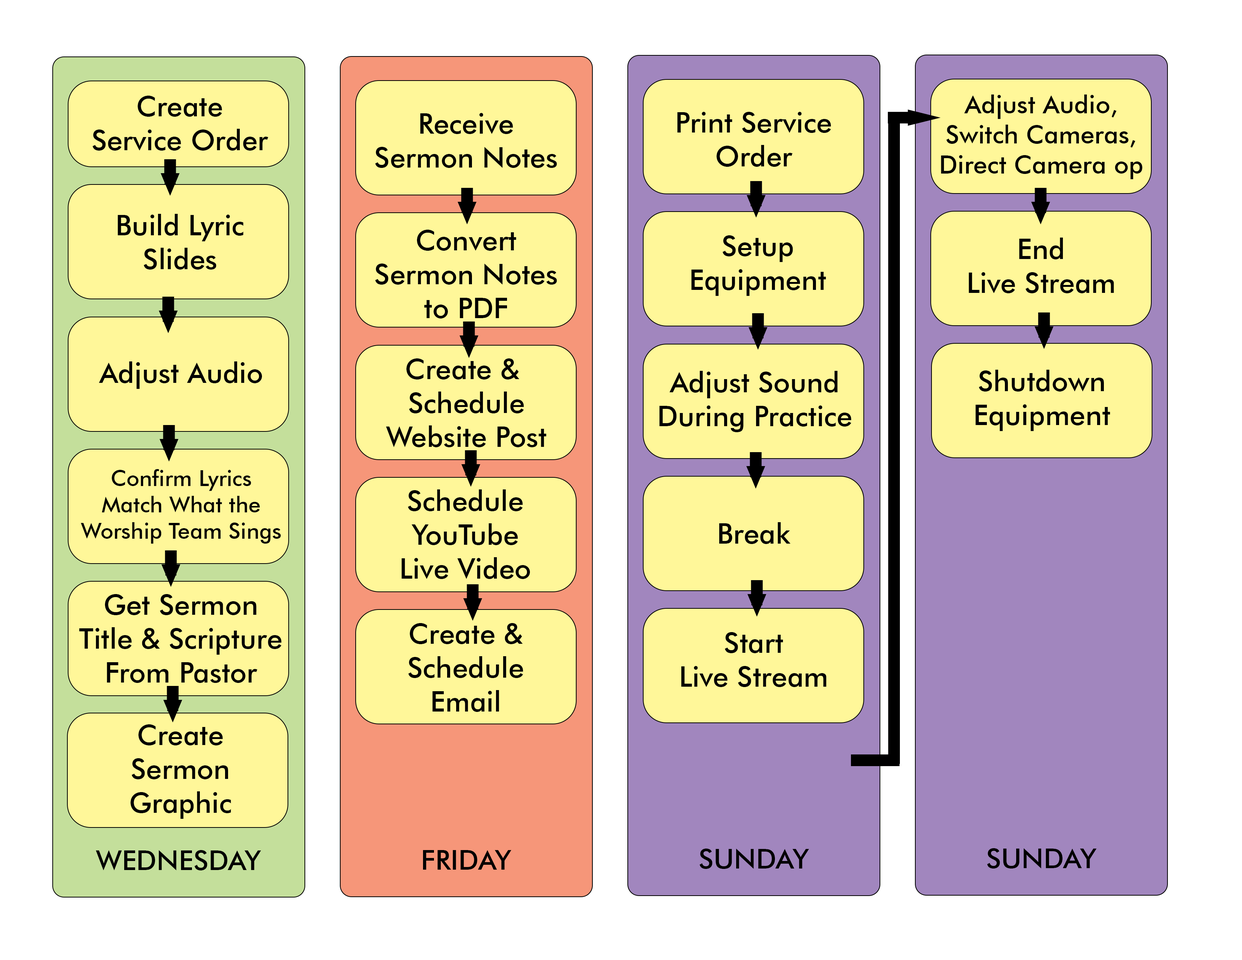
<style>
.page{position:relative;width:1242px;height:960px;background:#fff799}
.page>*{position:absolute;margin:0}
.t1{font:28.2px "FuturaBT-Medium";color:#000000}
.t2{font:25.1px "FuturaBT-Medium";color:#000000}
.t3{font:22px "FuturaBT-Medium";color:#000000}
.t4{font:47.1px "FuturaBT-Medium";color:#000000;text-transform:uppercase}
</style>
<div class="page">
<p class="t1" style="left:93px;top:96px;width:175px;height:55px;text-align:center">Create<br>Service Order</p>
<p class="t2" style="left:941px;top:94px;width:201px;height:85px;text-align:center">Adjust Audio,<br>Switch Cameras,<br>Direct Camera op</p>
<p class="t1" style="left:375px;top:113px;width:182px;height:55px;text-align:center">Receive<br>Sermon Notes</p>
<p class="t1" style="left:677px;top:112px;width:154px;height:55px;text-align:center">Print Service<br>Order</p>
<p class="t1" style="left:118px;top:214px;width:126px;height:56px;text-align:center">Build Lyric<br>Slides</p>
<p class="t1" style="left:375px;top:230px;width:182px;height:88px;text-align:center">Convert<br>Sermon Notes<br>to PDF</p>
<p class="t1" style="left:692px;top:235px;width:134px;height:61px;text-align:center">Setup<br>Equipment</p>
<p class="t1" style="left:969px;top:238px;width:145px;height:55px;text-align:center">End<br>Live Stream</p>
<p class="t1" style="left:99px;top:361px;width:163px;height:28px">Adjust Audio</p>
<p class="t1" style="left:386px;top:358px;width:161px;height:89px;text-align:center">Create &amp; <br>Schedule<br>Website Post</p>
<p class="t1" style="left:660px;top:371px;width:191px;height:61px;text-align:center">Adjust Sound<br>During Practice</p>
<p class="t1" style="left:976px;top:370px;width:134px;height:61px;text-align:center">Shutdown<br>Equipment</p>
<p class="t3" style="left:81px;top:469px;width:200px;height:75px;text-align:center">Confirm Lyrics<br>Match What the<br>Worship Team Sings</p>
<p class="t1" style="left:402px;top:489px;width:128px;height:90px;text-align:center">Schedule<br>YouTube<br>Live Video</p>
<p class="t1" style="left:719px;top:522px;width:72px;height:22px">Break</p>
<p class="t1" style="left:79px;top:594px;width:203px;height:89px;text-align:center">Get Sermon<br>Title &amp; Scripture<br>From Pastor</p>
<p class="t1" style="left:408px;top:623px;width:115px;height:89px;text-align:center">Create &amp;<br>Schedule<br>Email</p>
<p class="t1" style="left:681px;top:632px;width:146px;height:55px;text-align:center">Start<br>Live Stream</p>
<p class="t1" style="left:130px;top:724px;width:101px;height:95px;text-align:center">Create<br>Sermon<br>Graphic</p>
<p class="t4" style="left:96px;top:850px;width:165px;height:20px">Wednesday</p>
<p class="t4" style="left:423px;top:850px;width:89px;height:20px">Friday</p>
<p class="t4" style="left:700px;top:848px;width:109px;height:21px">Sunday</p>
<p class="t4" style="left:987px;top:848px;width:110px;height:20px">Sunday</p>
</div>
